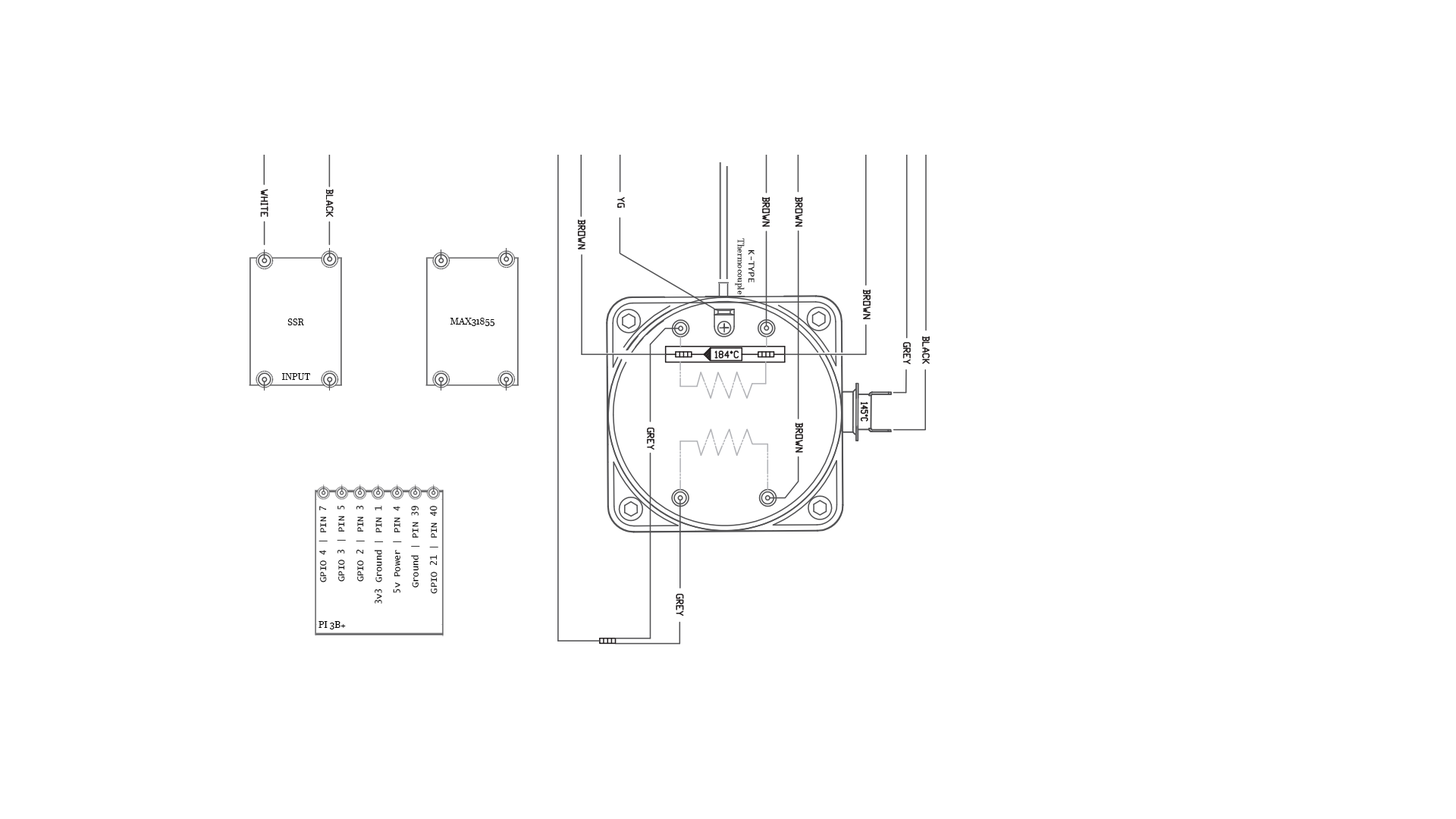
<style>
.page{position:relative;width:1456px;height:819px;background:#ffffff}
.page>*{position:absolute;margin:0}
.t1{font:9.1px "JavaneseText";color:#000000}
.t2{font:9.1px "LucidaConsole";color:#000000}
</style>
<div class="page">
<p class="t1" style="left:735px;top:238px;width:20px;height:57px;text-align:center;rotate:90deg"><span class="t2">K-TYPE<br></span>Thermocouple</p>
<p class="t1" style="left:450px;top:318px;width:45px;height:8px"><span class="t2"><br></span>MAX31855</p>
<p class="t1" style="left:287px;top:318px;width:17px;height:7px"><span class="t2"><br></span>SSR</p>
<p class="t1" style="left:282px;top:373px;width:28px;height:7px"><span class="t2"><br></span>INPUT</p>
<p class="t2" style="left:318px;top:506px;width:10px;height:76px;rotate:-90deg">GPIO 4 | PIN 7</p>
<p class="t2" style="left:337px;top:505px;width:9px;height:77px;rotate:-90deg">GPIO 3 | PIN 5</p>
<p class="t2" style="left:356px;top:505px;width:9px;height:77px;rotate:-90deg">GPIO 2 | PIN 3</p>
<p class="t2" style="left:374px;top:505px;width:10px;height:99px;rotate:-90deg">3v3 Ground | PIN 1</p>
<p class="t2" style="left:393px;top:506px;width:9px;height:87px;rotate:-90deg">5v Power | PIN 4</p>
<p class="t2" style="left:411px;top:506px;width:9px;height:82px;rotate:-90deg">Ground | PIN 39</p>
<p class="t2" style="left:429px;top:506px;width:9px;height:88px;rotate:-90deg">GPIO 21 | PIN 40</p>
<p class="t1" style="left:318px;top:621px;width:28px;height:8px"><span class="t2"><br></span>PI 3B+</p>
</div>
